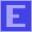
<style>
.page{position:relative;width:32px;height:32px;background:#4342e6}
.page>*{position:absolute;margin:0}
.t1{font:25px "C64User-Style";color:#a6a1ff}
</style>
<div class="page">
<p class="t1" style="left:6px;top:5px;width:20px;height:22px">E</p>
</div>
